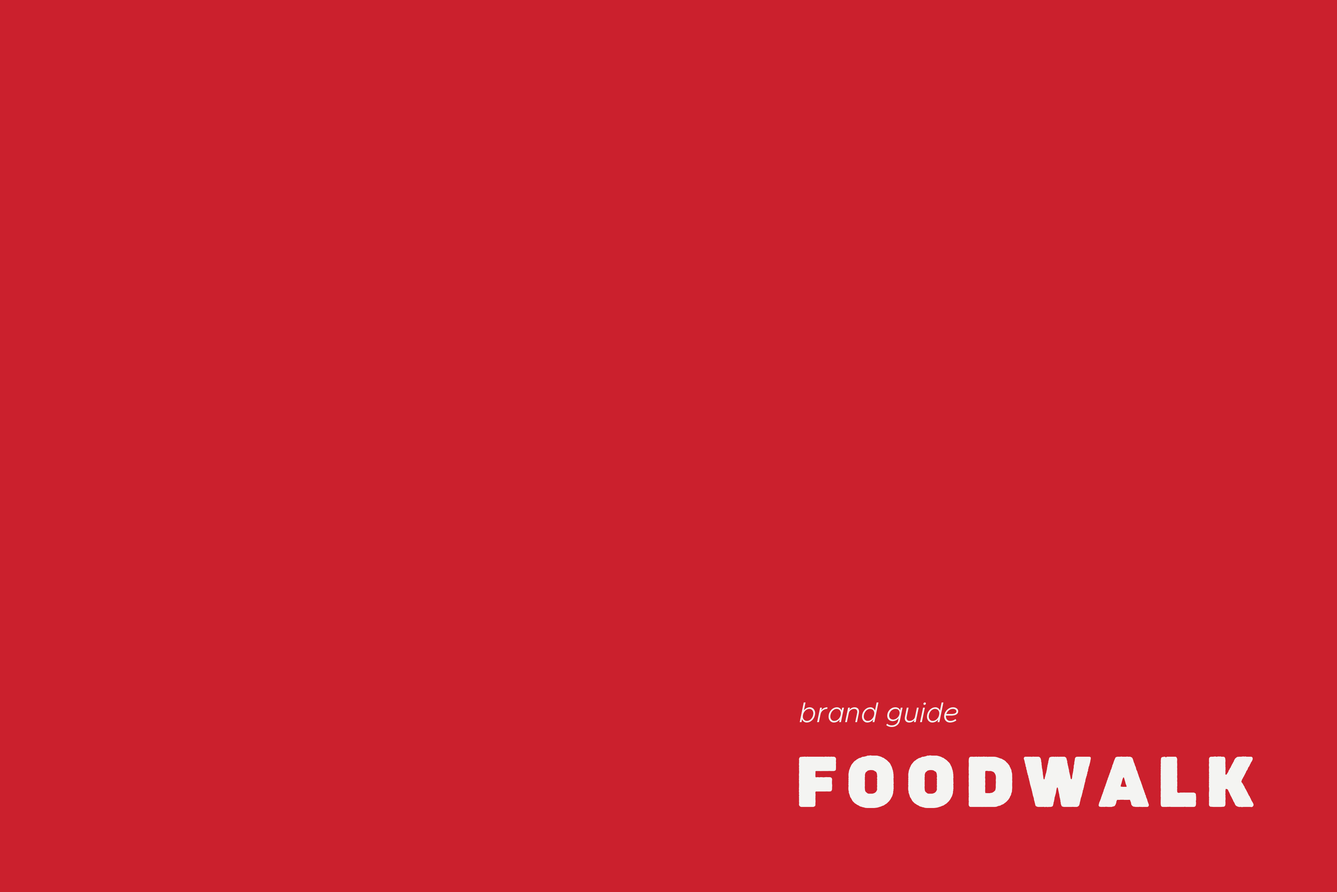
<style>
.page{position:relative;width:1337px;height:892px;background:#cb202d}
.page>*{position:absolute;margin:0}
.t1{font:27.9px "Metropolis-LightItalic";color:#f4f4f2}
.t2{font:70.4px "PantonRustHeavy-Base";color:#f4f4f2}
</style>
<div class="page">
<p class="t1" style="left:800px;top:702px;width:158px;height:25px">brand guide</p>
<p class="t2" style="left:799px;top:755px;width:455px;height:53px">F O O D W A L K</p>
</div>
